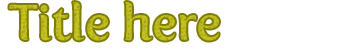
<style>
.page{position:relative;width:343px;height:51px;background:#ffffff}
.page>*{position:absolute;margin:0}
.t1{font:50px "Fertigo-Regular";color:#bdbc1e}
</style>
<div class="page">
<p class="t1" style="left:9px;top:2px;width:210px;height:39px">Title here</p>
</div>
